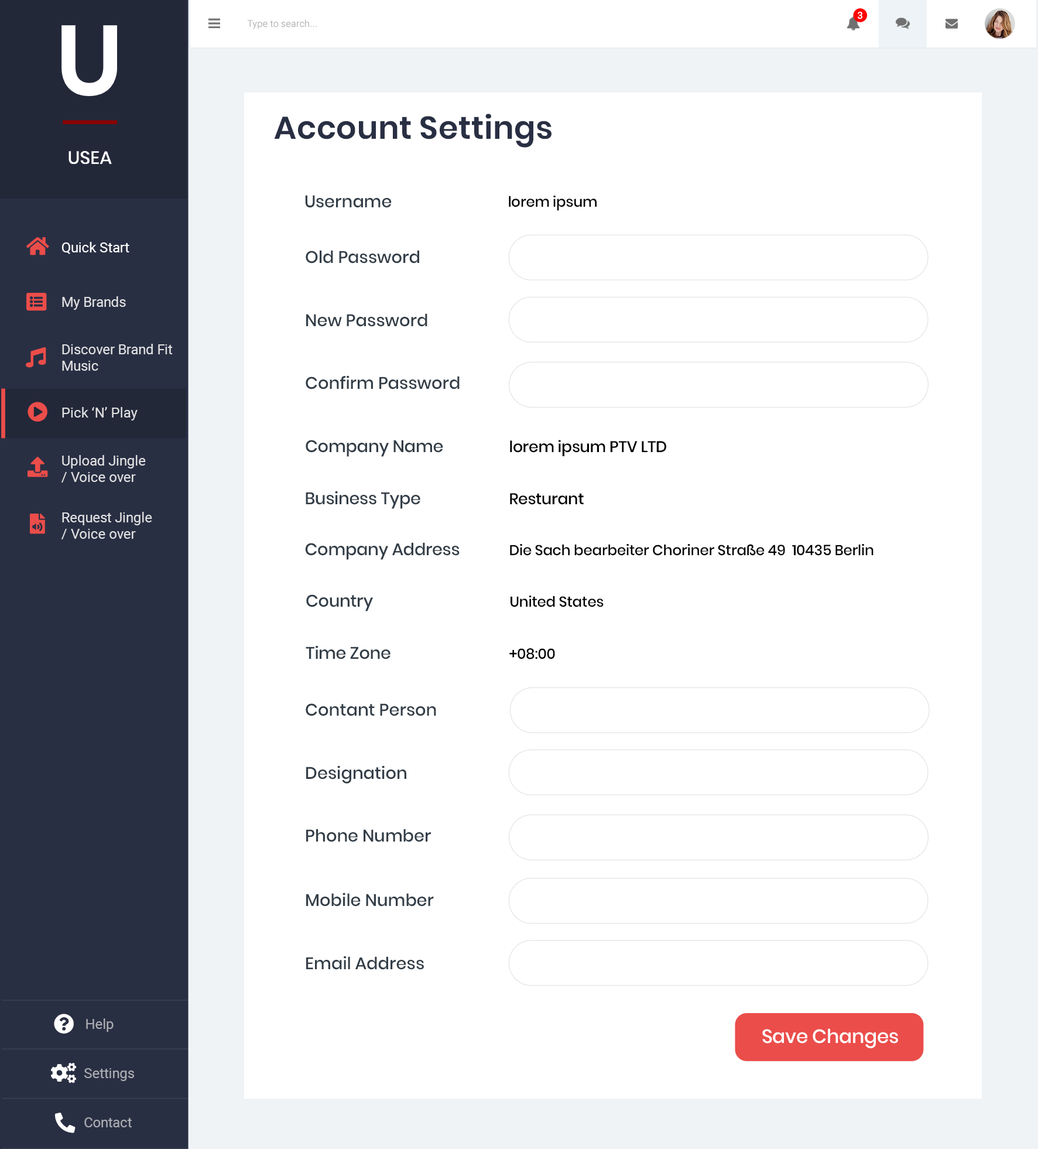
<style>
.page{position:relative;width:1038px;height:1149px;background:#ffffff}
.page>*{position:absolute;margin:0}
.t1{font:9.6px "Roboto-Medium";color:#ffffff}
.t2{font:9.6px "Roboto-Regular";color:#b7b7b7}
.t3{font:31.6px "Poppins-SemiBold";letter-spacing:0.01em;color:#292f43}
.t4{font:16.8px "Poppins-Medium";color:#333e48}
.t5{font:14.4px "Poppins-Medium";letter-spacing:-0.01em;color:#000000}
.t6{font:13.9px "Roboto-Regular";color:#ffffff}
.t7{font:13.9px "Roboto-Regular";color:#e0e0e2}
.t8{font:13.9px "Roboto-Regular";color:#dfe0e1}
.t9{font:16.8px "Poppins-Medium";letter-spacing:-0.01em;color:#333e48}
.t10{font:15.6px "Poppins-Medium";letter-spacing:-0.01em;color:#000000}
.t11{font:13.9px "Roboto-Regular";color:#abacb2}
.t12{font:19.2px "Poppins-Medium";letter-spacing:-0.01em;color:#ffffff}
</style>
<div class="page">
<p class="t1" style="left:858px;top:12px;width:4px;height:7px">3</p>
<p class="t2" style="left:247px;top:19px;width:70px;height:10px">Type to search...</p>
<p class="t3" style="left:274px;top:114px;width:278px;height:34px">Account Settings</p>
<p class="t4" style="left:305px;top:195px;width:87px;height:13px">Username</p>
<p class="t5" style="left:509px;top:195px;width:88px;height:16px">lorem ipsum</p>
<p class="t6" style="left:61px;top:242px;width:68px;height:12px">Quick Start</p>
<p class="t4" style="left:306px;top:250px;width:113px;height:13px">Old Password</p>
<p class="t7" style="left:62px;top:296px;width:64px;height:14px">My Brands</p>
<p class="t4" style="left:306px;top:313px;width:121px;height:14px">New Password</p>
<p class="t7" style="left:62px;top:344px;width:111px;height:27px">Discover Brand Fit <br>Music</p>
<p class="t4" style="left:306px;top:375px;width:154px;height:14px">Confirm Password</p>
<p class="t8" style="left:62px;top:407px;width:76px;height:13px">Pick ‘N’ Play</p>
<p class="t9" style="left:306px;top:440px;width:137px;height:17px">Company Name</p>
<p class="t10" style="left:510px;top:440px;width:156px;height:16px">lorem ipsum PTV LTD</p>
<p class="t7" style="left:61px;top:455px;width:85px;height:27px">Upload Jingle<br>/ Voice over</p>
<p class="t9" style="left:306px;top:491px;width:114px;height:18px">Business Type</p>
<p class="t10" style="left:510px;top:493px;width:74px;height:12px">Resturant</p>
<p class="t7" style="left:61px;top:512px;width:91px;height:27px">Request Jingle<br>/ Voice over</p>
<p class="t9" style="left:305px;top:542px;width:155px;height:18px">Company Address</p>
<p class="t5" style="left:510px;top:543px;width:364px;height:13px">Die Sach bearbeiter Choriner Straße 49  10435 Berlin</p>
<p class="t9" style="left:306px;top:594px;width:67px;height:17px">Country</p>
<p class="t5" style="left:511px;top:595px;width:93px;height:12px">United States</p>
<p class="t9" style="left:306px;top:645px;width:85px;height:14px">Time Zone</p>
<p class="t5" style="left:509px;top:648px;width:46px;height:11px">+08:00</p>
<p class="t4" style="left:306px;top:703px;width:130px;height:13px">Contant Person</p>
<p class="t4" style="left:306px;top:765px;width:100px;height:18px">Designation</p>
<p class="t4" style="left:306px;top:828px;width:125px;height:14px">Phone Number</p>
<p class="t4" style="left:306px;top:892px;width:128px;height:14px">Mobile Number</p>
<p class="t4" style="left:306px;top:956px;width:118px;height:14px">Email Address</p>
<p class="t11" style="left:86px;top:1018px;width:28px;height:14px">Help</p>
<p class="t12" style="left:762px;top:1028px;width:136px;height:20px">Save Changes</p>
<p class="t11" style="left:84px;top:1068px;width:50px;height:13px">Settings</p>
<p class="t11" style="left:84px;top:1117px;width:48px;height:10px">Contact</p>
</div>
